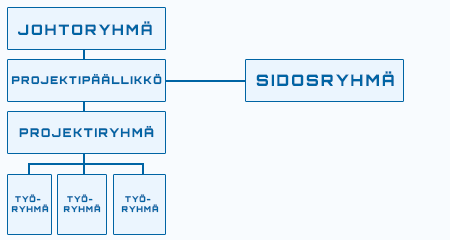
<style>
.page{position:relative;width:450px;height:240px;background:#f8fbfe}
.page>*{position:absolute;margin:0}
.t1{font:14.7px "Orbitron-Black";letter-spacing:0.13em;color:#0064a4;scale:0.97 1}
.t2{font:10.7px "Orbitron-Black";letter-spacing:0.13em;color:#0064a4;scale:0.97 1}
.t3{font:16px "Orbitron-Black";letter-spacing:0.13em;color:#0064a4;scale:0.97 1}
.t4{font:12px "Orbitron-Black";letter-spacing:0.13em;color:#0064a4;scale:0.97 1}
.t5{font:8px "Orbitron-Black";letter-spacing:0.13em;color:#0064a4;scale:0.97 1}
</style>
<div class="page">
<p class="t1" style="left:18px;top:21px;width:134px;height:14px">JOHTORYHMÄ</p>
<p class="t2" style="left:11px;top:73px;width:151px;height:12px">PROJEKTIPÄÄLLIKKÖ</p>
<p class="t3" style="left:256px;top:71px;width:138px;height:15px">SIDOSRYHMÄ</p>
<p class="t4" style="left:19px;top:125px;width:135px;height:13px">PROJEKTIRYHMÄ</p>
<p class="t5" style="left:11px;top:194px;width:38px;height:19px">TYÖ-<br>RYHMÄ</p>
<p class="t5" style="left:63px;top:194px;width:38px;height:19px">TYÖ-<br>RYHMÄ</p>
<p class="t5" style="left:121px;top:194px;width:38px;height:19px">TYÖ-<br>RYHMÄ</p>
</div>
